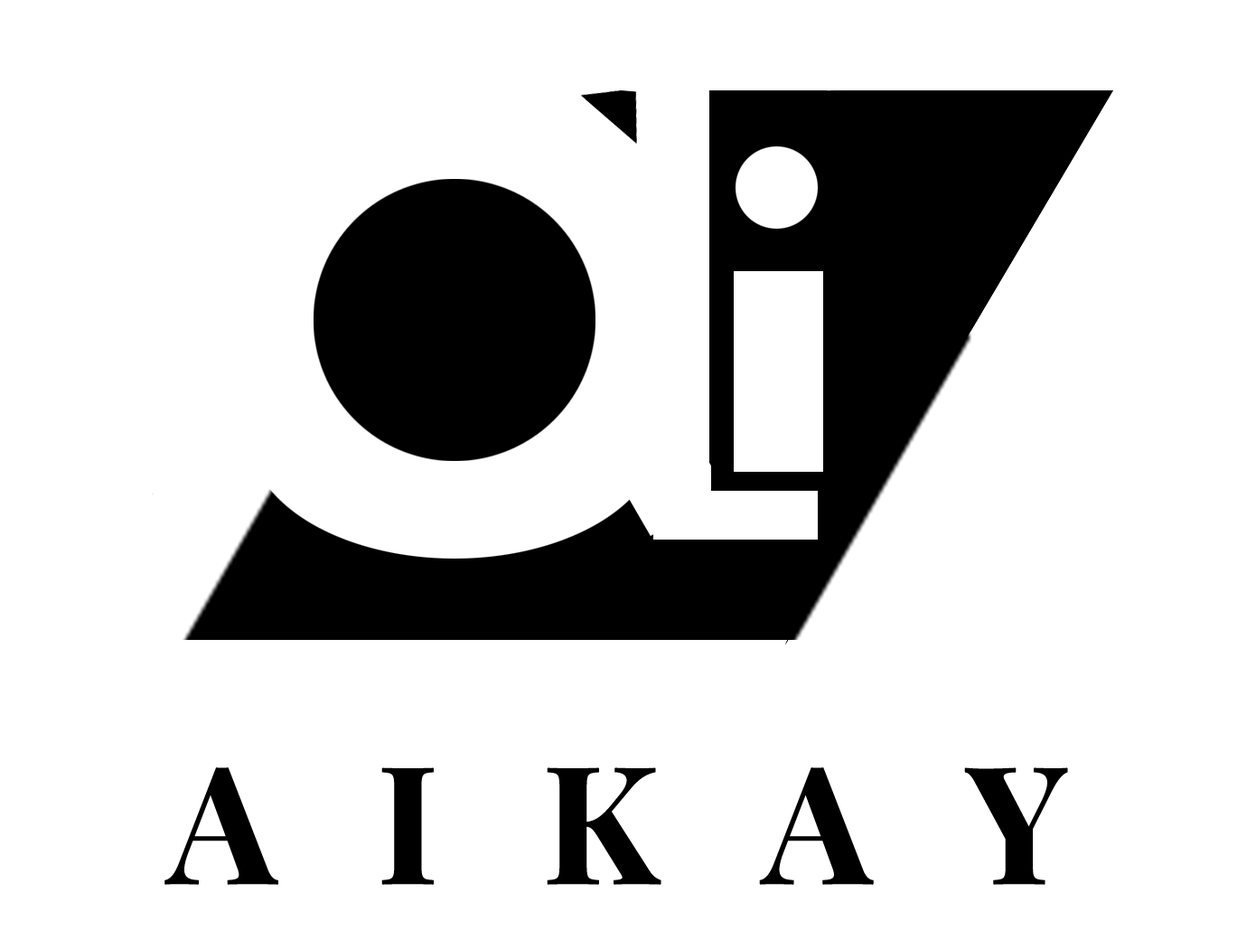
<style>
.page{position:relative;width:1256px;height:949px;background:#ffffff}
.page>*{position:absolute;margin:0}
.t1{font:163px "PlayfairDisplaySC-Bold";letter-spacing:0.625em;color:#000000;text-transform:uppercase;font-weight:bold}
</style>
<div class="page">
<p class="t1" style="left:165px;top:767px;width:903px;height:118px">AIKAY</p>
</div>
